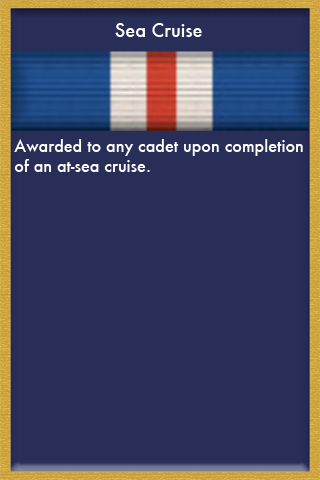
<style>
.page{position:relative;width:320px;height:480px;background:#292e59}
.page>*{position:absolute;margin:0}
.t1{font:18px "Futura-Medium";color:#ffffff}
.t2{font:16px "Futura-Medium";color:#ffffff}
</style>
<div class="page">
<p class="t1" style="left:115px;top:23px;width:87px;height:14px">Sea Cruise</p>
<p class="t2" style="left:14px;top:139px;width:289px;height:33px">Awarded to any cadet upon completion <br>of an at-sea cruise.</p>
</div>
